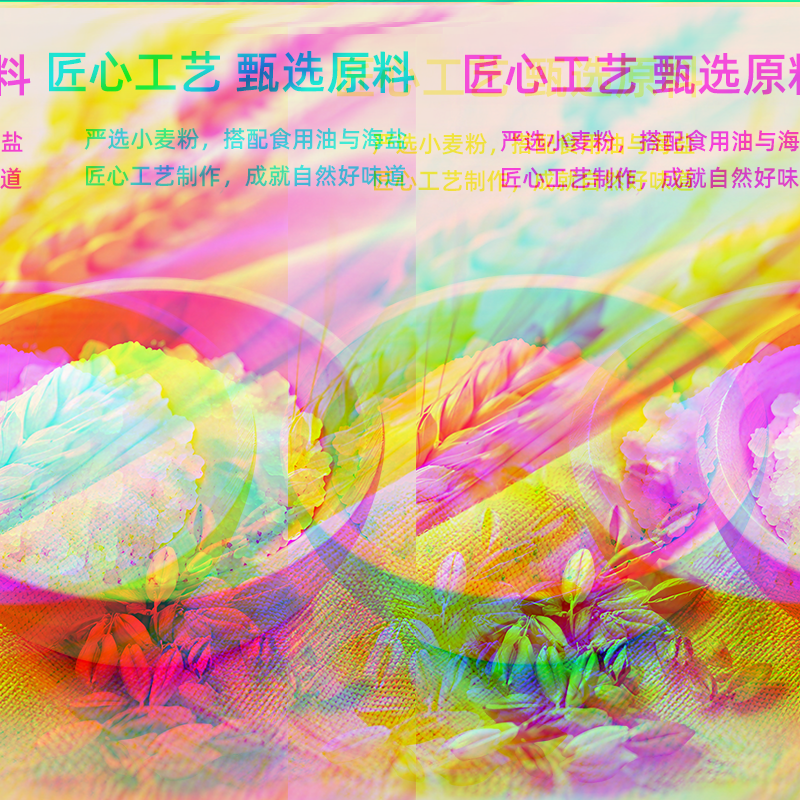
<style>
.page{position:relative;width:800px;height:800px}
.page>*{position:absolute;margin:0}
.t1{font:45.9px "AlibabaPuHuiTi-Medium"}
.t2{font:23.4px "AlibabaPuHuiTi-Medium"}
</style>
<div class="page">
<p class="t1" style="left:49px;top:49px;width:366px;height:43px">匠心工艺 甄选原料</p>
<p class="t2" style="left:86px;top:162px;width:320px;height:24px">匠心工艺制作，成就自然好味道</p>
</div>
